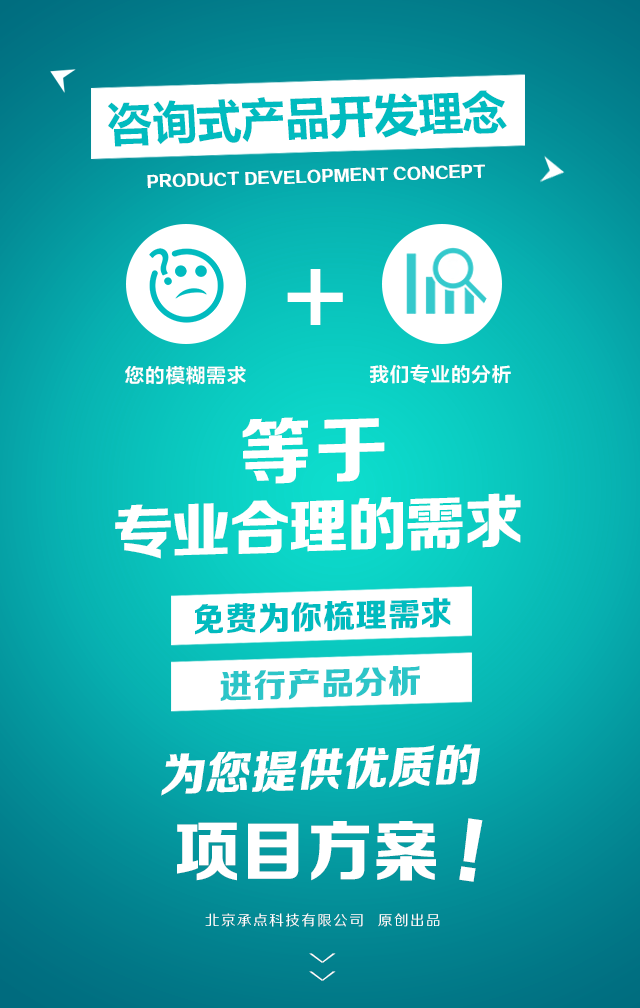
<style>
.page{position:relative;width:640px;height:1008px}
.page>*{position:absolute;margin:0}
.t1{font:48px "FZLTCHK--GBK1-0";letter-spacing:-0.05em;color:#01bbbf;text-transform:uppercase}
.t2{font:15.6px "FZZDHJW--GB1-0";letter-spacing:0.005em;color:#ffffff;text-transform:uppercase}
.t3{font:98.7px "FZLTCHJW--GB1-0";letter-spacing:0.5em;color:#ffffff;text-transform:uppercase}
.t4{font:19.4px "FZLTZCHK--GBK1-0";letter-spacing:0.05em;color:#ffffff;text-transform:uppercase}
.t5{font:72.8px "FZZDHJW--GB1-0";letter-spacing:0.05em;color:#ffffff;text-transform:uppercase}
.t6{font:59.4px "FZZDHJW--GB1-0";letter-spacing:-0.025em;color:#ffffff;text-transform:uppercase}
.t7{font:33.1px "FZZDHJW--GB1-0";letter-spacing:0.005em;color:#01bbbf;text-transform:uppercase}
.t8{font:33.1px "FZZDHJW--GB1-0";letter-spacing:0.005em;color:#2cc5c8;text-transform:uppercase}
.t9{font:45.9px "FZZDHJW--GB1-0";letter-spacing:0.005em;color:#ffffff;text-transform:uppercase}
.t10{font:66.1px "FZZDHJW--GB1-0";letter-spacing:0.005em;color:#ffffff;text-transform:uppercase}
.t11{font:73.4px "FZZDHJW--GB1-0";letter-spacing:0.005em;color:#ffffff;text-transform:uppercase}
.t12{font:14.2px "FZZHJW--GB1-0";letter-spacing:0.1em;color:#ffffff;text-transform:uppercase}
.t13{font:36.8px "FZZXHJW--GB1-0";letter-spacing:0.5em;color:#ffffff;text-transform:uppercase;scale:0.44 1}
</style>
<div class="page">
<p class="t1" style="left:108px;top:90px;width:399px;height:57px;rotate:-2deg">咨询式产品开发理念</p>
<p class="t2" style="left:147px;top:164px;width:338px;height:24px;rotate:-2deg">product development concept</p>
<p class="t3" style="left:287px;top:269px;width:56px;height:56px">+</p>
<p class="t4" style="left:125px;top:366px;width:121px;height:19px">您的模糊需求</p>
<p class="t4" style="left:369px;top:364px;width:142px;height:20px">我们专业的分析</p>
<p class="t5" style="left:242px;top:417px;width:143px;height:67px;rotate:-2deg">等于</p>
<p class="t6" style="left:115px;top:493px;width:406px;height:66px;rotate:-2deg">专业合理的需求</p>
<p class="t7" style="left:195px;top:597px;width:256px;height:38px;rotate:-1deg">免费为你梳理需求</p>
<p class="t8" style="left:220px;top:665px;width:200px;height:36px;rotate:-1deg">进行产品分析</p>
<p class="t9" style="left:161px;top:744px;width:319px;height:52px;rotate:-2deg">为您提供优质的</p>
<p class="t10" style="left:177px;top:821px;width:259px;height:60px">项目方案</p>
<p class="t11" style="left:459px;top:818px;width:24px;height:64px;rotate:8deg">!</p>
<p class="t12" style="left:205px;top:913px;width:235px;height:14px">北京承点科技有限公司  原创出品</p>
<p class="t13" style="left:309px;top:953px;width:27px;height:28px;rotate:90deg">&gt;&gt;</p>
</div>
